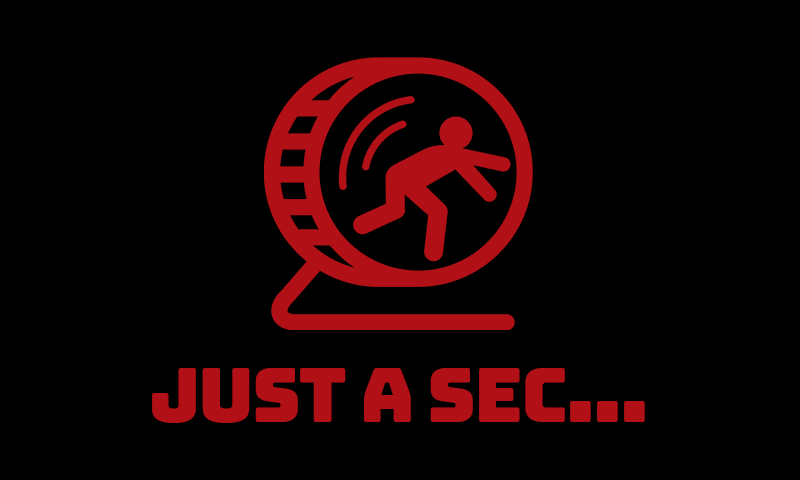
<style>
.page{position:relative;width:800px;height:480px;background:#000000}
.page>*{position:absolute;margin:0}
.t1{font:75px "Bungee-Regular";letter-spacing:-0.025em;color:#b11116}
</style>
<div class="page">
<p class="t1" style="left:152px;top:368px;width:493px;height:55px">Just a sec...</p>
</div>
